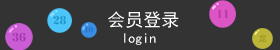
<style>
.page{position:relative;width:280px;height:50px;background:#333333}
.page>*{position:absolute;margin:0}
.t1{font:18px "SimHei";color:#ffffff}
</style>
<div class="page">
<p class="t1" style="left:108px;top:11px;width:71px;height:17px">会员登录</p>
</div>
